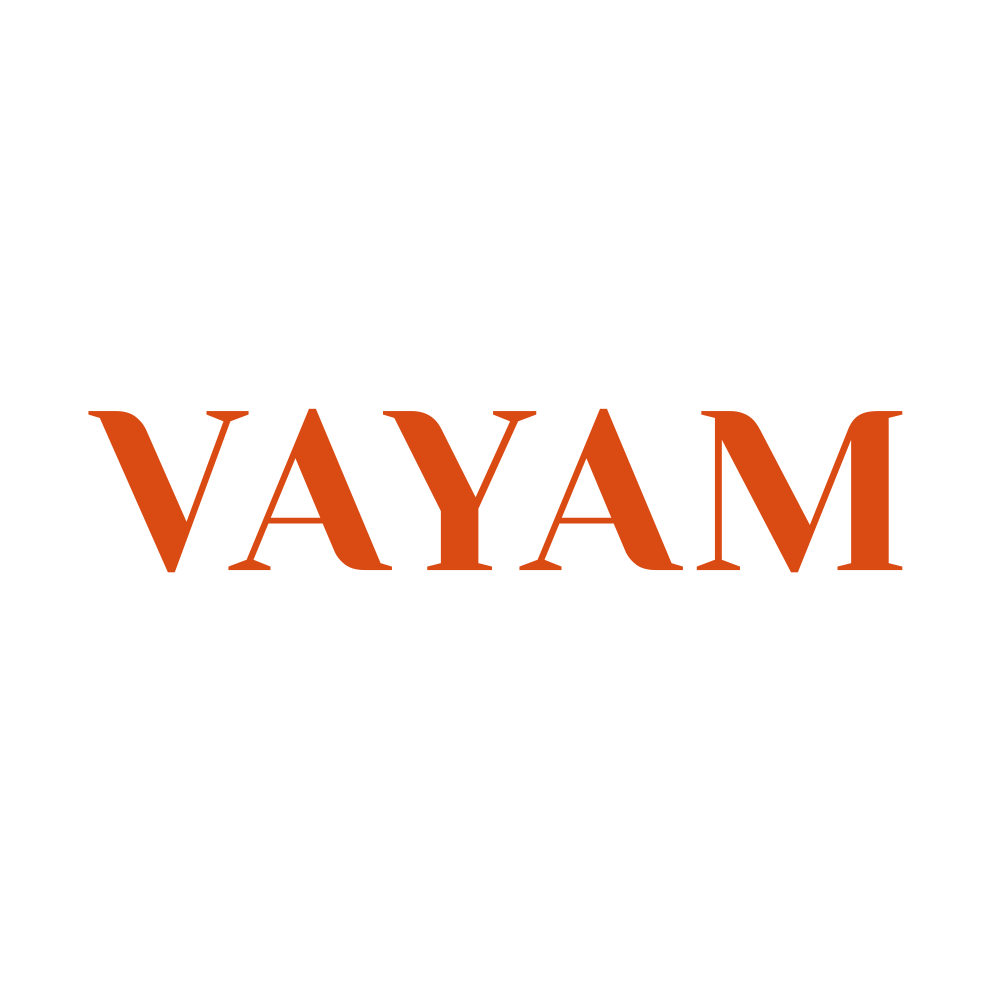
<style>
.page{position:relative;width:1000px;height:1000px;background:#ffffff}
.page>*{position:absolute;margin:0}
.t1{font:227.2px "YesevaOne";letter-spacing:0.05em;color:#da4a13;text-transform:uppercase}
</style>
<div class="page">
<p class="t1" style="left:88px;top:408px;width:815px;height:165px">Vayam</p>
</div>
